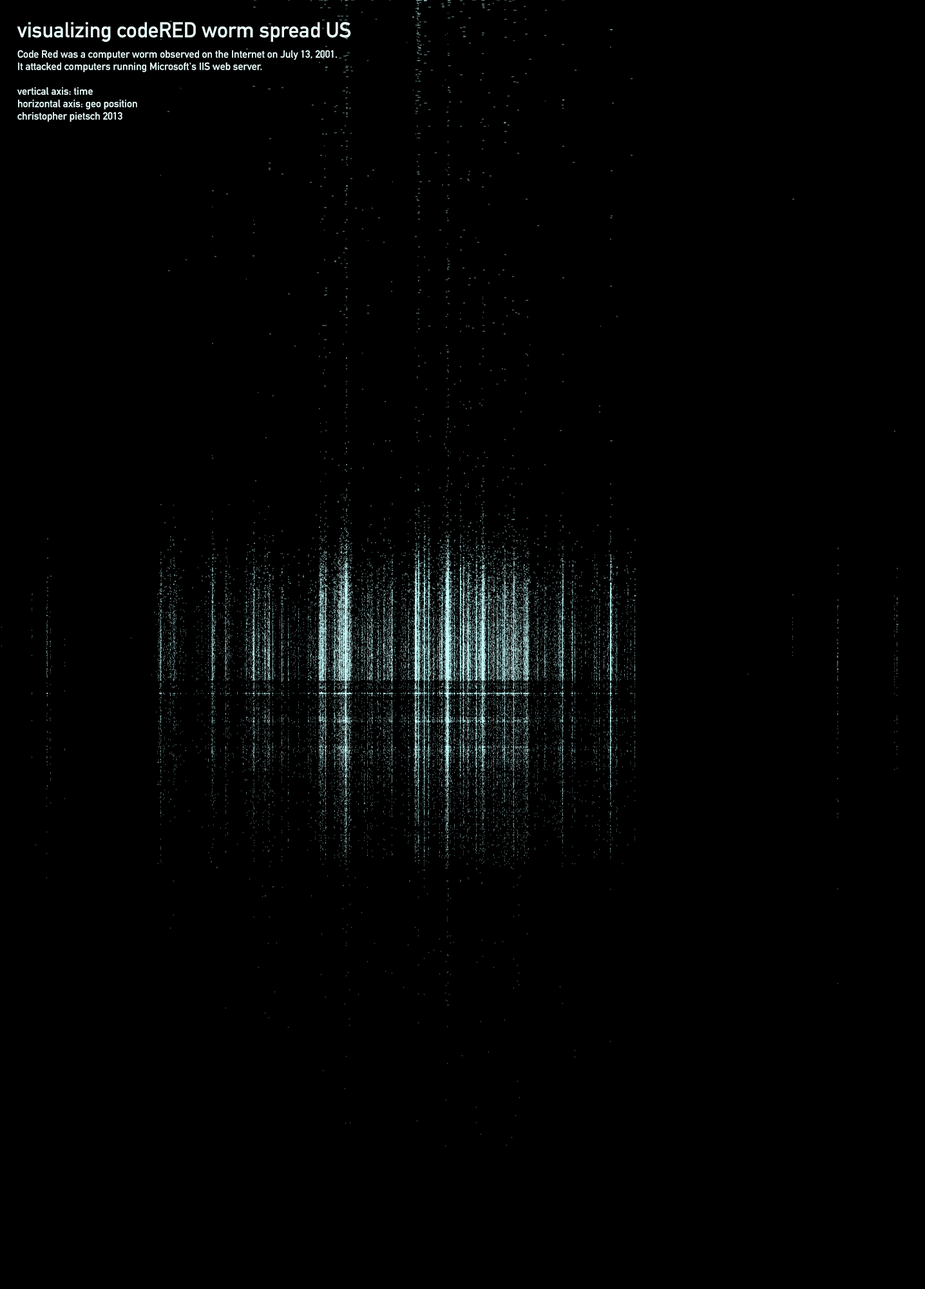
<style>
.page{position:relative;width:925px;height:1289px;background:#000000}
.page>*{position:absolute;margin:0}
.t1{font:21.3px "DINMittelschrift";color:#edffff}
.t2{font:10.3px "DINMittelschrift";color:#edffff}
</style>
<div class="page">
<p class="t1" style="left:17px;top:22px;width:334px;height:20px">visualizing codeRED worm spread US</p>
<p class="t2" style="left:17px;top:50px;width:320px;height:72px">Code Red was a computer worm observed on the Internet on July 13, 2001.<br>It attacked computers running Microsoft's IIS web server.<br><br>vertical axis: time<br>horizontal axis: geo position<br>christopher pietsch 2013</p>
</div>
